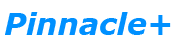
<style>
.page{position:relative;width:175px;height:50px;background:#ffffff}
.page>*{position:absolute;margin:0}
.t1{font:30px "Verdana-BoldItalic";color:#0090ff}
</style>
<div class="page">
<p class="t1" style="left:5px;top:12px;width:166px;height:23px">Pinnacle+</p>
</div>
